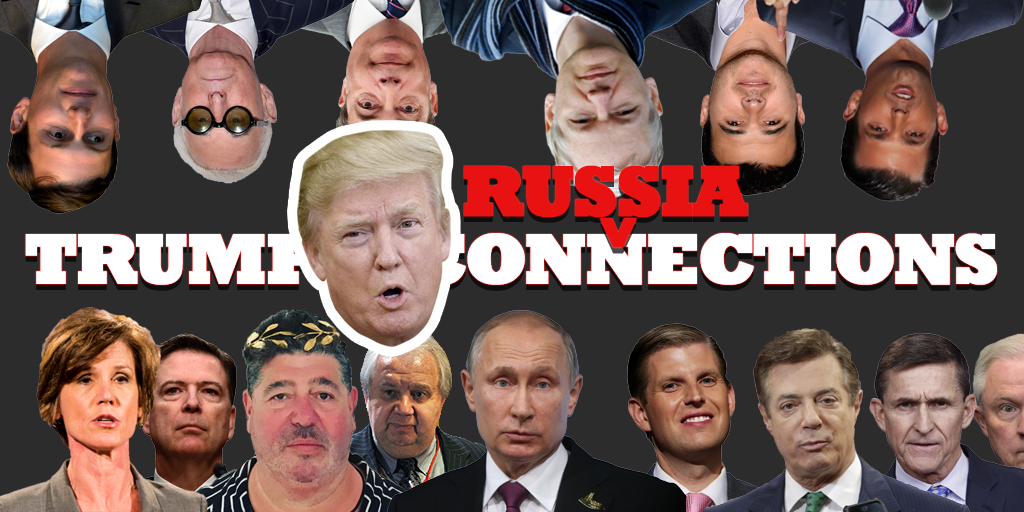
<style>
.page{position:relative;width:1024px;height:512px;background:#2c2c2c}
.page>*{position:absolute;margin:0}
.t1{font:72px "Rockwell-ExtraBold";letter-spacing:-0.05em;color:#e81212;font-weight:bold}
.t2{font:72px "Rockwell-ExtraBold";letter-spacing:-0.05em;color:#ffffff;font-weight:bold}
</style>
<div class="page">
<p class="t1" style="left:464px;top:165px;width:284px;height:52px">RUSSIA</p>
<p class="t2" style="left:25px;top:233px;width:972px;height:52px">TRUMP’S CONNECTIONS</p>
</div>
